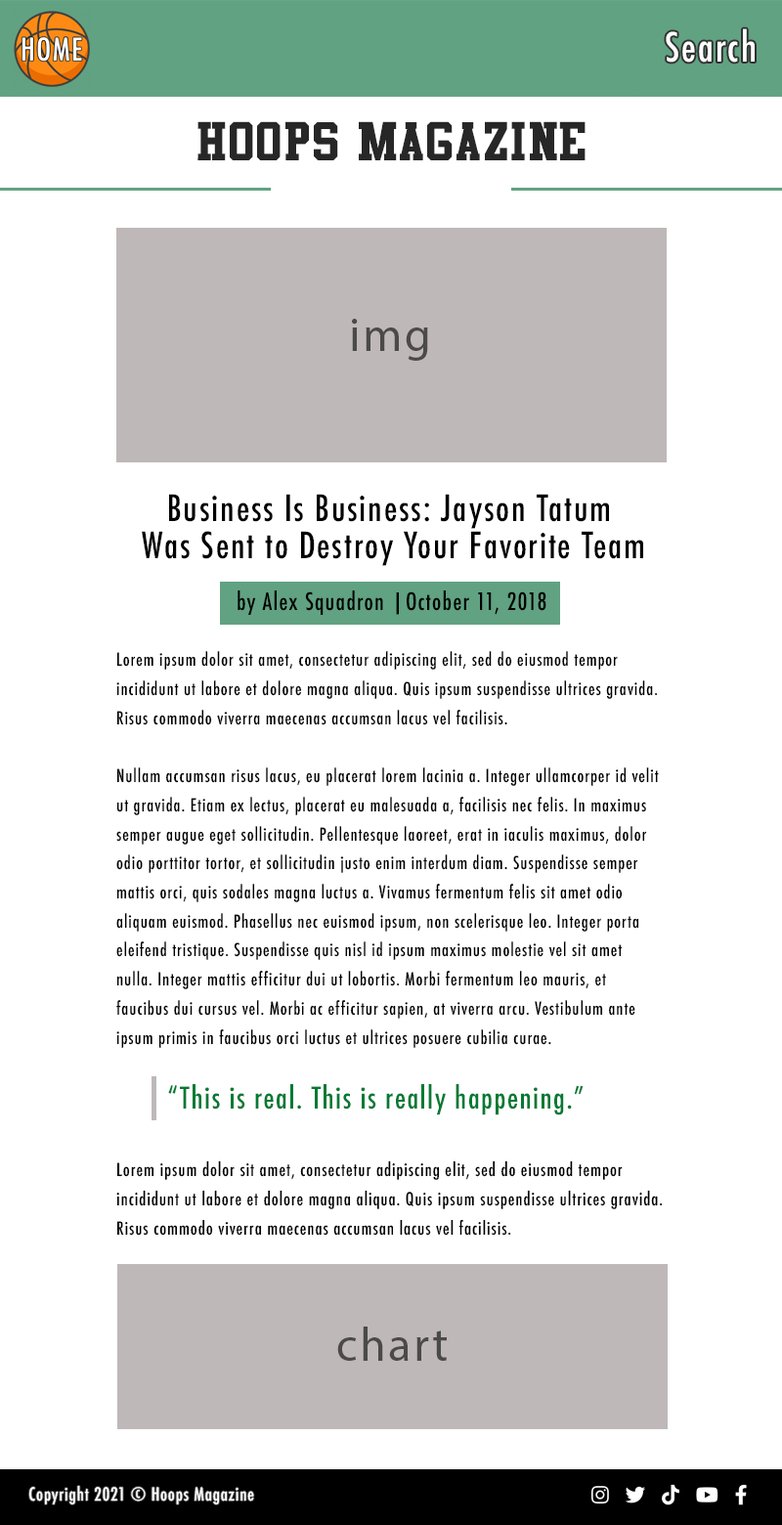
<style>
.page{position:relative;width:782px;height:1525px;background:#ffffff}
.page>*{position:absolute;margin:0}
.t1{font:39.1px "Futura-CondensedMedium";letter-spacing:0.05em;color:#ffffff}
.t2{font:47.3px "Athletic";letter-spacing:0.05em;color:#272727}
.t3{font:47.3px "MyriadPro-Regular";letter-spacing:0.05em;color:#393737}
.t4{font:35.2px/37px "Futura-CondensedMedium";letter-spacing:0.05em;color:#000000}
.t5{font:23.5px "Futura-CondensedMedium";letter-spacing:0.05em;color:#000000}
.t6{font:17.4px/29.1px "Futura-CondensedMedium";letter-spacing:0.05em;color:#000000}
.t7{font:29.3px "Futura-CondensedMedium";letter-spacing:0.05em;color:#007a33}
.t8{font:17.6px/29.3px "Futura-CondensedMedium";letter-spacing:0.05em;color:#000000}
.t9{font:17.6px "Futura-CondensedMedium";letter-spacing:0.05em;color:#ffffff}
</style>
<div class="page">
<p class="t1" style="left:666px;top:28px;width:89px;height:35px">Search</p>
<p class="t2" style="left:197px;top:121px;width:389px;height:39px">Hoops Magazine</p>
<p class="t3" style="left:352px;top:319px;width:76px;height:42px;opacity:0.9">img</p>
<p class="t4" style="left:142px;top:494px;width:501px;height:72px;text-align:center">Business Is Business: Jayson Tatum <br>Was Sent to Destroy Your Favorite Team</p>
<p class="t5" style="left:238px;top:590px;width:308px;height:25px">by Alex Squadron |October 11, 2018</p>
<p class="t6" style="left:116px;top:651px;width:543px;height:397px">Lorem ipsum dolor sit amet, consectetur adipiscing elit, sed do eiusmod tempor incididunt ut labore et dolore magna aliqua. Quis ipsum suspendisse ultrices gravida. Risus commodo viverra maecenas accumsan lacus vel facilisis. <br><br>Nullam accumsan risus lacus, eu placerat lorem lacinia a. Integer ullamcorper id velit ut gravida. Etiam ex lectus, placerat eu malesuada a, facilisis nec felis. In maximus semper augue eget sollicitudin. Pellentesque laoreet, erat in iaculis maximus, dolor odio porttitor tortor, et sollicitudin justo enim interdum diam. Suspendisse semper mattis orci, quis sodales magna luctus a. Vivamus fermentum felis sit amet odio aliquam euismod. Phasellus nec euismod ipsum, non scelerisque leo. Integer porta eleifend tristique. Suspendisse quis nisl id ipsum maximus molestie vel sit amet nulla. Integer mattis efficitur dui ut lobortis. Morbi fermentum leo mauris, et faucibus dui cursus vel. Morbi ac efficitur sapien, at viverra arcu. Vestibulum ante ipsum primis in faucibus orci luctus et ultrices posuere cubilia curae.</p>
<p class="t7" style="left:168px;top:1084px;width:416px;height:31px">“This is real. This is really happening.”</p>
<p class="t8" style="left:116px;top:1160px;width:547px;height:76px">Lorem ipsum dolor sit amet, consectetur adipiscing elit, sed do eiusmod tempor incididunt ut labore et dolore magna aliqua. Quis ipsum suspendisse ultrices gravida. Risus commodo viverra maecenas accumsan lacus vel facilisis.</p>
<p class="t3" style="left:337px;top:1326px;width:110px;height:35px;opacity:0.9">chart</p>
<p class="t9" style="left:28px;top:1485px;width:226px;height:19px">Copyright 2021 © Hoops Magazine</p>
</div>
